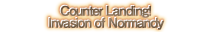
<style>
.page{position:relative;width:212px;height:32px;background:#ffffff}
.page>*{position:absolute;margin:0}
.t1{font:13px/12px "FutoGoB101Pr5-Bold";letter-spacing:-0.08em;font-weight:bold}
.t2{font:13px/12px "FutoGoB101Pr5-Bold";letter-spacing:-0.08em;color:#7f6951;font-weight:bold}
</style>
<div class="page">
<p class="t1" style="left:48px;top:4px;width:115px;height:25px;text-align:center">Counter Landing!<br>Invasion of Normandy</p>
<p class="t2" style="left:49px;top:5px;width:115px;height:25px;text-align:center">Counter Landing!<br>Invasion of Normandy</p>
</div>
